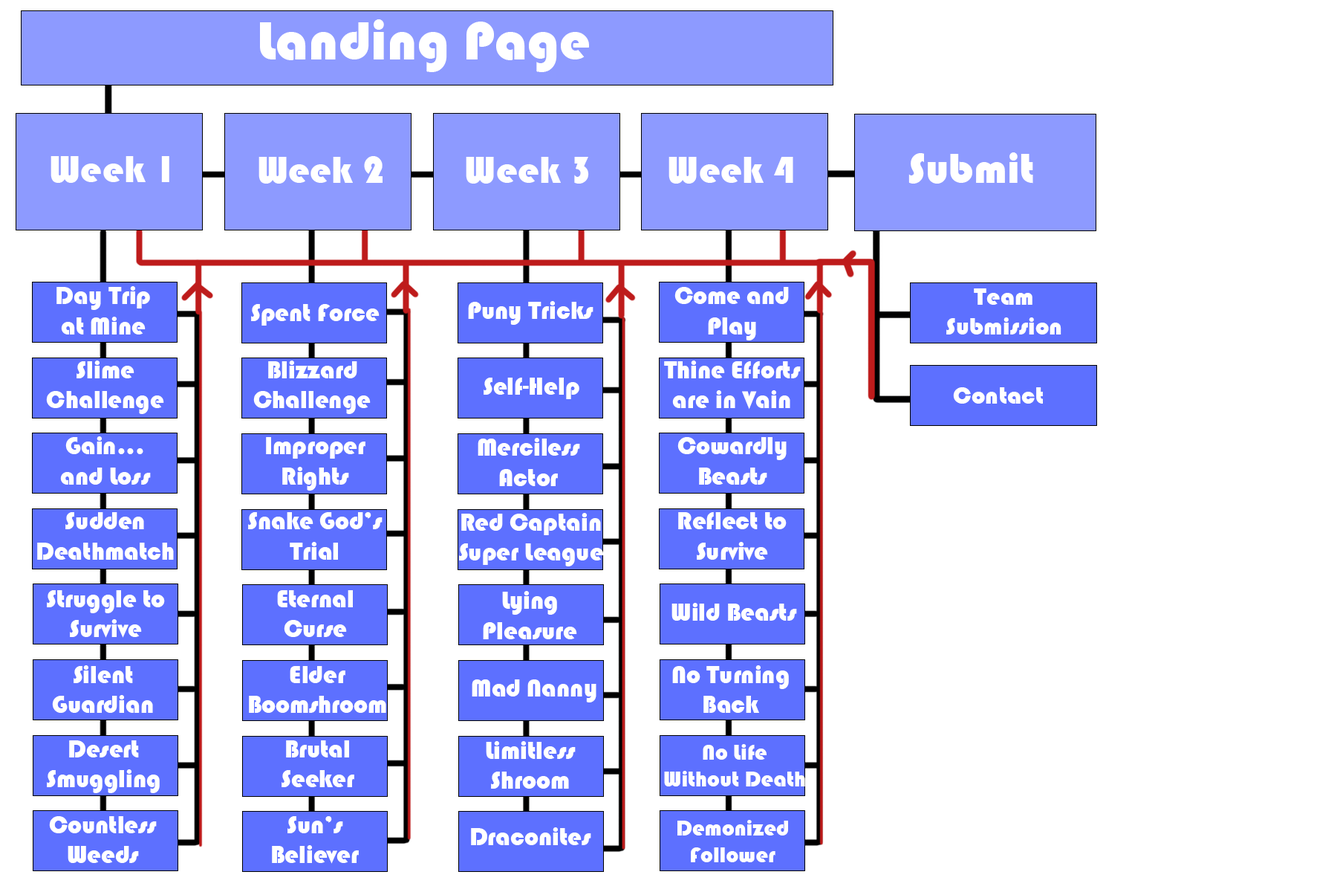
<style>
.page{position:relative;width:1337px;height:892px;background:#ffffff}
.page>*{position:absolute;margin:0}
.t1{font:55.7px "Bauhaus93";color:#ffffff}
.t2{font:39px "Bauhaus93";color:#ffffff}
.t3{font:43.3px "Bauhaus93";color:#ffffff}
.t4{font:25.1px "Bauhaus93";color:#ffffff}
.t5{font:24.8px "Bauhaus93";color:#ffffff}
.t6{font:22.3px "Bauhaus93";color:#ffffff}
</style>
<div class="page">
<p class="t1" style="left:260px;top:19px;width:329px;height:53px">Landing Page</p>
<p class="t2" style="left:51px;top:156px;width:118px;height:27px">Week 1</p>
<p class="t2" style="left:259px;top:156px;width:124px;height:28px">Week 2</p>
<p class="t2" style="left:466px;top:157px;width:123px;height:27px">Week 3</p>
<p class="t2" style="left:669px;top:157px;width:125px;height:27px">Week 4</p>
<p class="t3" style="left:909px;top:152px;width:125px;height:32px">Submit</p>
<p class="t4" style="left:56px;top:286px;width:94px;height:48px;text-align:center">Day Trip<br>at Mine</p>
<p class="t4" style="left:675px;top:287px;width:114px;height:53px;text-align:center">Come and Play</p>
<p class="t5" style="left:947px;top:288px;width:115px;height:46px;text-align:center">Team Submission</p>
<p class="t4" style="left:251px;top:304px;width:129px;height:21px">Spent Force</p>
<p class="t4" style="left:468px;top:301px;width:126px;height:24px">Puny Tricks</p>
<p class="t4" style="left:46px;top:360px;width:118px;height:54px;text-align:center">Slime Challenge</p>
<p class="t4" style="left:253px;top:360px;width:118px;height:54px;text-align:center">Blizzard Challenge</p>
<p class="t4" style="left:664px;top:360px;width:137px;height:49px;text-align:center">Thine Efforts are in Vain</p>
<p class="t4" style="left:484px;top:377px;width:96px;height:22px">Self-Help</p>
<p class="t5" style="left:953px;top:387px;width:90px;height:16px">Contact</p>
<p class="t4" style="left:60px;top:436px;width:91px;height:48px;text-align:center">Gain...<br>and Loss</p>
<p class="t4" style="left:266px;top:437px;width:100px;height:53px;text-align:center">Improper Rights</p>
<p class="t4" style="left:478px;top:438px;width:102px;height:48px;text-align:center">Merciless Actor</p>
<p class="t4" style="left:678px;top:437px;width:109px;height:47px;text-align:center">Cowardly Beasts</p>
<p class="t4" style="left:37px;top:512px;width:137px;height:47px;text-align:center">Sudden Deathmatch</p>
<p class="t4" style="left:248px;top:512px;width:135px;height:47px;text-align:center">Snake God’s Trial</p>
<p class="t4" style="left:459px;top:513px;width:145px;height:53px;text-align:center">Red Captain Super League</p>
<p class="t4" style="left:678px;top:511px;width:109px;height:49px;text-align:center">Reflect to Survive</p>
<p class="t4" style="left:47px;top:590px;width:118px;height:47px;text-align:center">Struggle to Survive</p>
<p class="t4" style="left:277px;top:590px;width:76px;height:47px;text-align:center">Eternal Curse</p>
<p class="t4" style="left:483px;top:591px;width:94px;height:48px;text-align:center">Lying Pleasure</p>
<p class="t4" style="left:672px;top:603px;width:125px;height:17px">Wild Beasts</p>
<p class="t4" style="left:52px;top:665px;width:101px;height:48px;text-align:center">Silent Guardian</p>
<p class="t4" style="left:249px;top:666px;width:137px;height:47px;text-align:center">Elder Boomshroom</p>
<p class="t4" style="left:672px;top:665px;width:117px;height:48px;text-align:center">No Turning Back</p>
<p class="t4" style="left:472px;top:679px;width:125px;height:23px">Mad Nanny</p>
<p class="t4" style="left:47px;top:740px;width:113px;height:53px;text-align:center">Desert Smuggling</p>
<p class="t4" style="left:282px;top:740px;width:72px;height:47px;text-align:center">Brutal Seeker</p>
<p class="t4" style="left:486px;top:741px;width:90px;height:47px;text-align:center">Limitless Shroom</p>
<p class="t6" style="left:664px;top:744px;width:141px;height:42px;text-align:center">No Life    Without Death</p>
<p class="t4" style="left:49px;top:816px;width:108px;height:47px;text-align:center">Countless Weeds</p>
<p class="t4" style="left:272px;top:816px;width:87px;height:47px;text-align:center">Sun’s Believer</p>
<p class="t6" style="left:678px;top:820px;width:110px;height:42px;text-align:center">Demonized Follower</p>
<p class="t4" style="left:471px;top:827px;width:120px;height:18px">Draconites</p>
</div>
